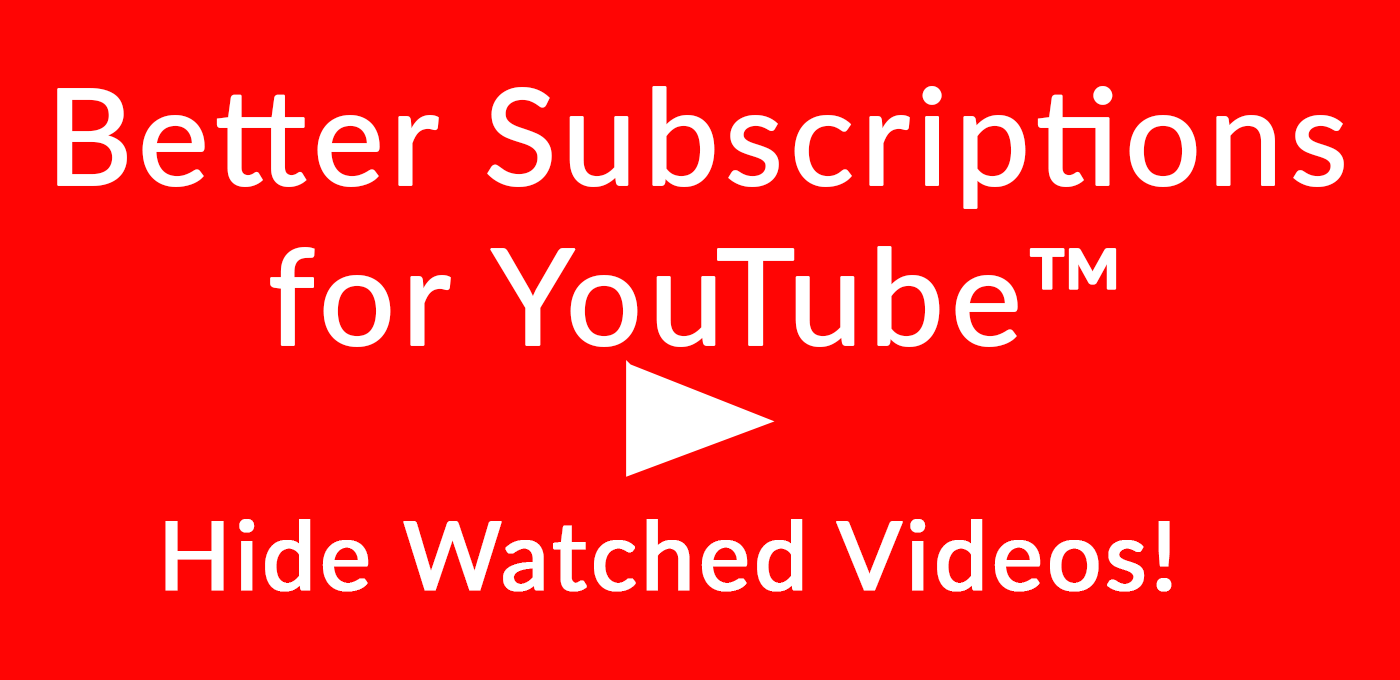
<style>
.page{position:relative;width:1400px;height:680px;background:#ff0504}
.page>*{position:absolute;margin:0}
.t1{font:133.4px "Lato-Regular";letter-spacing:0.025em;color:#ffffff;font-weight:bold}
.t2{font:94.6px "Lato-Regular";letter-spacing:0.025em;color:#ffffff;font-weight:bold}
</style>
<div class="page">
<p class="t1" style="left:57px;top:86px;width:1287px;height:261px;text-align:center">Better Subscriptions<br>for YouTube™</p>
<p class="t2" style="left:165px;top:519px;width:1007px;height:73px">Hide Watched Videos!</p>
</div>
